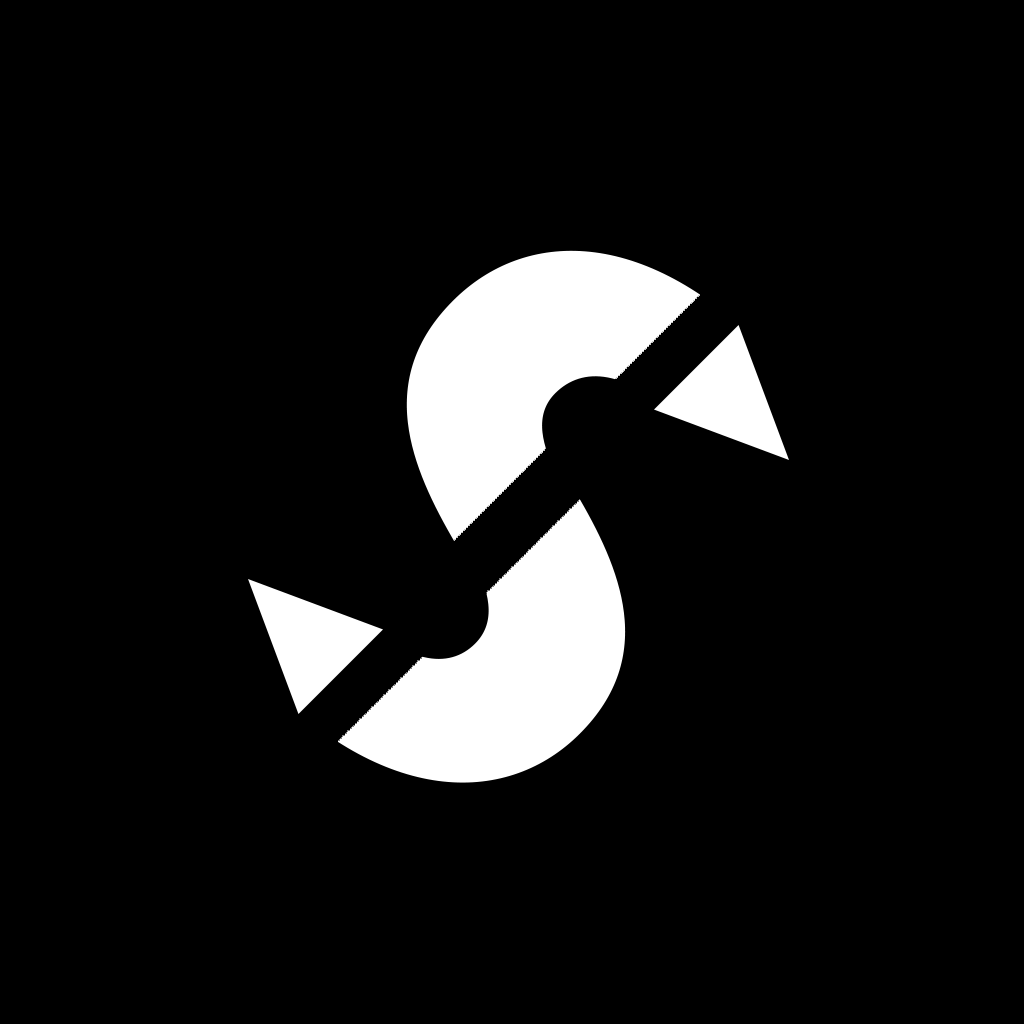
<style>
.page{position:relative;width:1024px;height:1024px;background:#000000}
.page>*{position:absolute;margin:0}
.t1{font:855.1px "Montserrat-Bold";letter-spacing:0.09em}
</style>
<div class="page">
<p class="t1" style="left:145px;top:165px;width:686px;height:618px;rotate:45deg">S</p>
<p class="t1" style="left:187px;top:250px;width:686px;height:618px;rotate:45deg">S</p>
</div>
